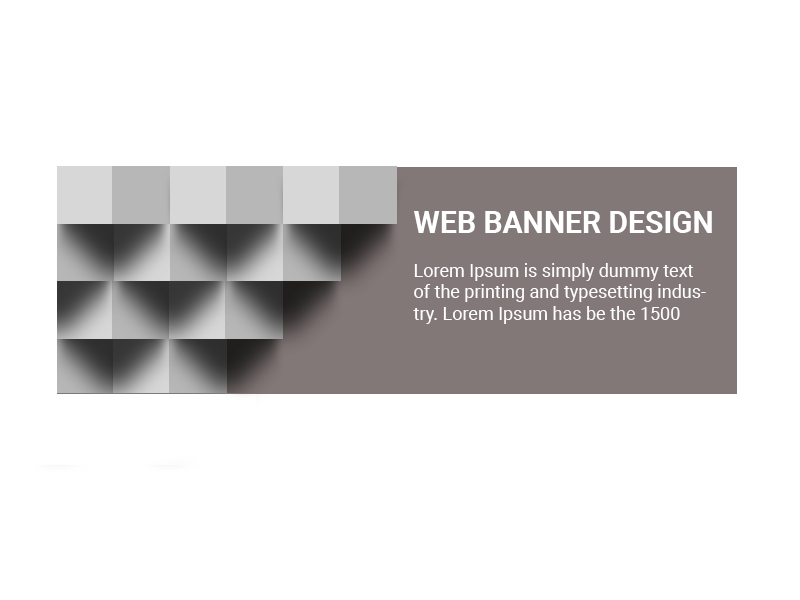
<style>
.page{position:relative;width:800px;height:600px;background:#ffffff}
.page>*{position:absolute;margin:0}
.t1{font:30px "Roboto-Bold";color:#ffffff}
.t2{font:18px "Roboto-Regular";color:#ffffff}
</style>
<div class="page">
<p class="t1" style="left:414px;top:211px;width:298px;height:22px">WEB BANNER DESIGN</p>
<p class="t2" style="left:413px;top:263px;width:293px;height:61px;text-align:right">Lorem Ipsum is simply dummy text of the printing and typesetting industry. Lorem Ipsum has be the 1500</p>
</div>
